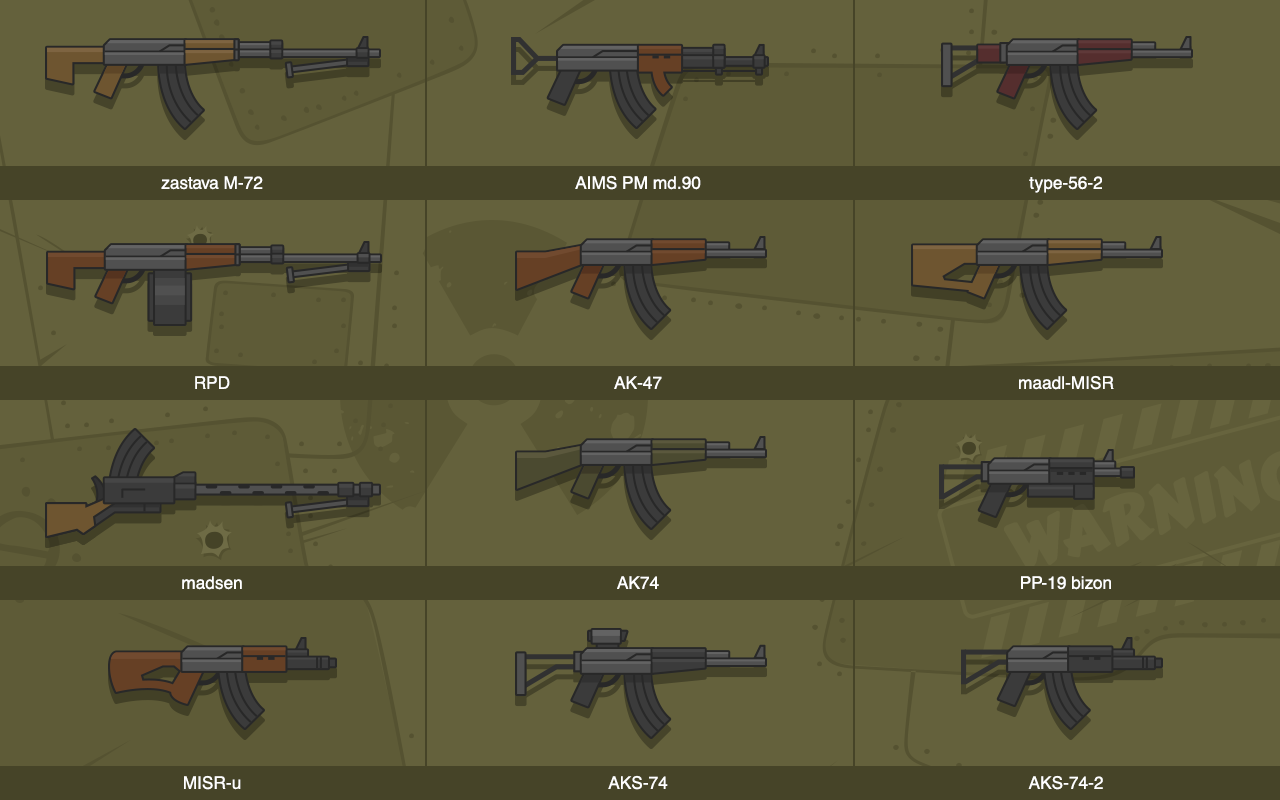
<style>
.page{position:relative;width:1280px;height:800px;background:#64613c}
.page>*{position:absolute;margin:0}
.t1{font:17.4px/200px "HelveticaCE-Regular";color:#ffffff}
</style>
<div class="page">
<p class="t1" style="left:161px;top:176px;width:102px;height:614px;text-align:center">zastava M-72<br>RPD<br>madsen<br>MISR-u</p>
<p class="t1" style="left:575px;top:175px;width:126px;height:615px;text-align:center">AIMS PM md.90<br>AK-47<br>AK74<br>AKS-74</p>
<p class="t1" style="left:1019px;top:176px;width:95px;height:614px;text-align:center">type-56-2<br>maadl-MISR<br>PP-19 bizon<br>AKS-74-2</p>
</div>
